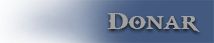
<style>
.page{position:relative;width:214px;height:43px}
.page>*{position:absolute;margin:0}
.t1{font:26px "GodOfWar";color:#a1a1a1}
</style>
<div class="page">
<p class="t1" style="left:107px;top:13px;width:93px;height:19px">Donar</p>
</div>
